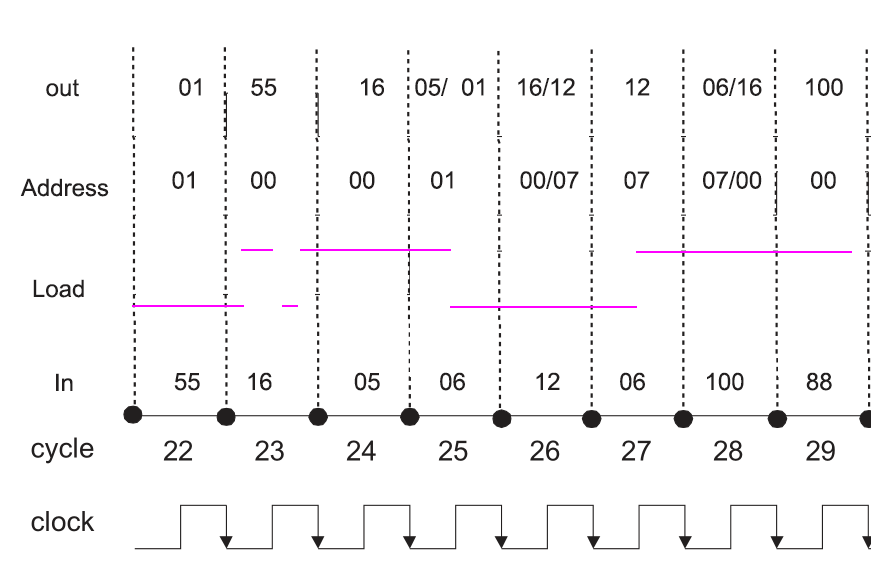
<style>
.page{position:relative;width:871px;height:582px;background:#ffffff}
.page>*{position:absolute;margin:0}
.t1{font:24px "ArialMT";color:#221f1f}
</style>
<div class="page">
<p class="t1" style="left:179px;top:78px;width:664px;height:18px">01  55   16    05/  01   16/12   12    06/16   100</p>
<p class="t1" style="left:46px;top:79px;width:33px;height:18px">out</p>
<p class="t1" style="left:172px;top:171px;width:664px;height:18px">01   00       00   01          00/07    07     07/00     00</p>
<p class="t1" style="left:20px;top:178px;width:89px;height:19px">Address</p>
<p class="t1" style="left:33px;top:279px;width:51px;height:19px">Load</p>
<p class="t1" style="left:56px;top:373px;width:17px;height:18px">In</p>
<p class="t1" style="left:174px;top:372px;width:658px;height:19px">55  16   05    06  12    06     100     88</p>
</div>
